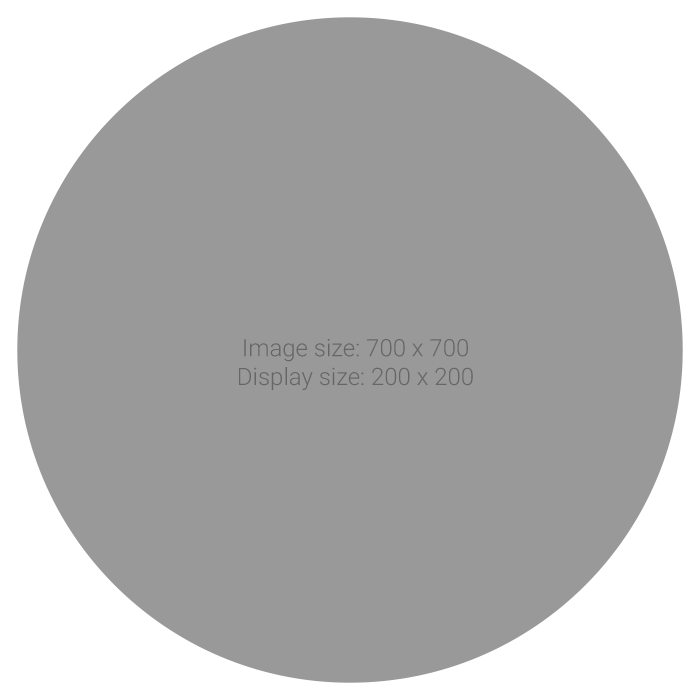
<style>
.page{position:relative;width:700px;height:700px;background:#999999}
.page>*{position:absolute;margin:0}
.t1{font:24px "Roboto-Light";color:#666666}
</style>
<div class="page">
<p class="t1" style="left:239px;top:339px;width:234px;height:51px;text-align:center">Image size: 700 x 700<br>Display size: 200 x 200</p>
</div>
